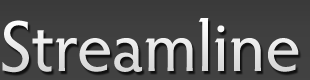
<style>
.page{position:relative;width:310px;height:80px}
.page>*{position:absolute;margin:0}
.t1{font:72px "HypatiaSansPro-Regular";color:#e4e4e4}
</style>
<div class="page">
<p class="t1" style="left:2px;top:18px;width:297px;height:55px">Streamline</p>
</div>
